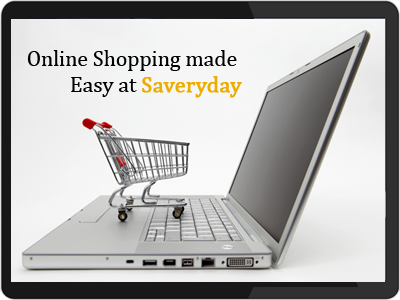
<style>
.page{position:relative;width:400px;height:300px}
.page>*{position:absolute;margin:0}
.t1{font:21.8px "Cambria";color:#000000}
.t2{font:21.8px "Cambria";color:#ecac00;font-weight:bold}
</style>
<div class="page">
<p class="t1" style="left:27px;top:50px;width:215px;height:48px">Online Shopping made <br>         Easy at <span class="t2">Saveryday</span></p>
</div>
